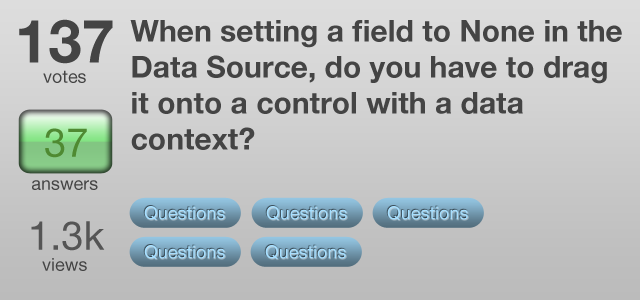
<style>
.page{position:relative;width:640px;height:300px}
.page>*{position:absolute;margin:0}
.t1{font:60px "HelveticaNeue-Bold";color:#444444}
.t2{font:30px "HelveticaNeue-Bold";color:#444444}
.t3{font:18px "HelveticaNeue";color:#444444}
.t4{font:40px "HelveticaNeue";color:#4f8a32}
.t5{font:18px "HelveticaNeue";color:#a7dfff}
.t6{font:40px "HelveticaNeue";color:#555555}
</style>
<div class="page">
<p class="t1" style="left:19px;top:19px;width:94px;height:45px">137</p>
<p class="t2" style="left:130px;top:20px;width:492px;height:130px">When setting a field to None in the <br>Data Source, do you have to drag <br>it onto a control with a data <br>context?</p>
<p class="t3" style="left:43px;top:70px;width:43px;height:13px">votes</p>
<p class="t4" style="left:45px;top:128px;width:42px;height:30px">37</p>
<p class="t3" style="left:32px;top:180px;width:66px;height:10px">answers</p>
<p class="t5" style="left:144px;top:206px;width:81px;height:15px">Questions</p>
<p class="t5" style="left:266px;top:206px;width:81px;height:15px">Questions</p>
<p class="t5" style="left:387px;top:206px;width:81px;height:15px">Questions</p>
<p class="t6" style="left:31px;top:221px;width:74px;height:30px">1.3k</p>
<p class="t5" style="left:144px;top:245px;width:81px;height:15px">Questions</p>
<p class="t5" style="left:265px;top:245px;width:81px;height:15px">Questions</p>
<p class="t3" style="left:42px;top:258px;width:45px;height:13px">views</p>
</div>
